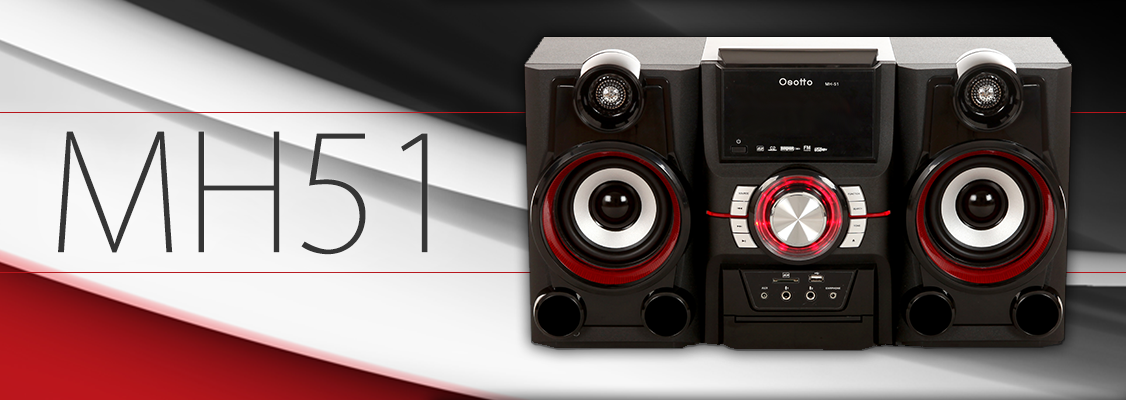
<style>
.page{position:relative;width:1126px;height:400px}
.page>*{position:absolute;margin:0}
.t1{font:159.4px "KozGoPr6N-ExtraLight";color:#353535}
</style>
<div class="page">
<p class="t1" style="left:58px;top:131px;width:370px;height:124px">MH51</p>
</div>
